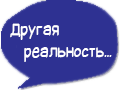
<style>
.page{position:relative;width:120px;height:90px;background:#2e3192}
.page>*{position:absolute;margin:0}
.t1{font:18px "SuplexmentaryComicNC";color:#ffffff;scale:0.8 1}
</style>
<div class="page">
<p class="t1" style="left:10px;top:23px;width:102px;height:39px">Другая <br>     реальность...</p>
</div>
